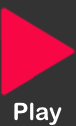
<style>
.page{position:relative;width:76px;height:126px;background:#333333}
.page>*{position:absolute;margin:0}
.t1{font:24px "ArialRoundedMTBold";color:#fefefe}
</style>
<div class="page">
<p class="t1" style="left:14px;top:102px;width:48px;height:23px">Play</p>
</div>
